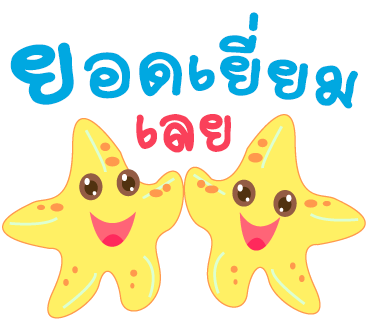
<style>
.page{position:relative;width:370px;height:320px;background:#ffffff}
.page>*{position:absolute;margin:0}
.t1{font:110px "2005_iannnnnMTV";color:#00a8e1;scale:1.06 1}
.t2{font:170px "2005_iannnnnMTV";color:#00a8e1;scale:1.06 1}
.t3{font:120px "2005_iannnnnMTV";color:#00a8e1;scale:1.06 1}
.t4{font:105px "2005_iannnnnMTV";color:#fa405a}
</style>
<div class="page">
<p class="t1" style="left:10px;top:12px;width:348px;height:97px"><span class="t2">ย</span><span class="t3">อด</span>เยี่ยม</p>
<p class="t4" style="left:136px;top:114px;width:95px;height:39px">เลย</p>
</div>
